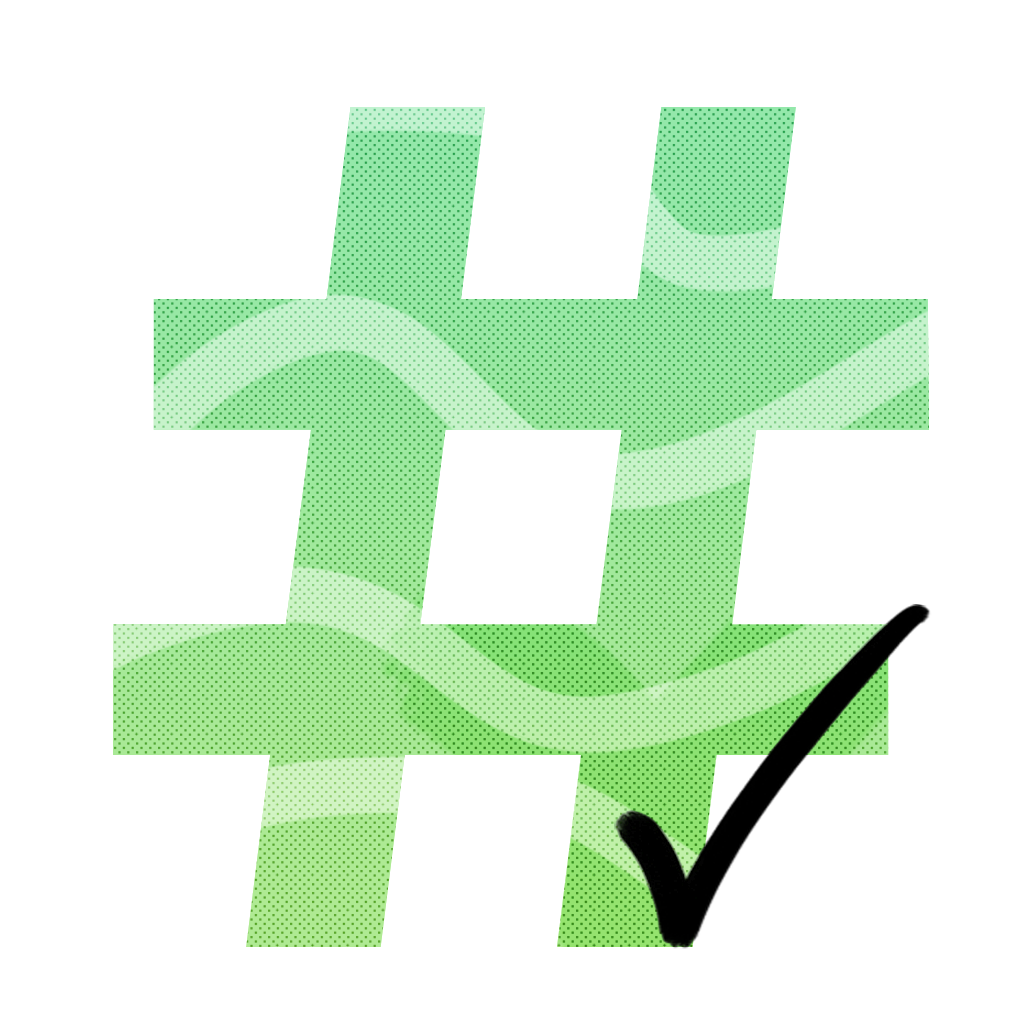
<style>
.page{position:relative;width:1024px;height:1024px;background:#ffffff}
.page>*{position:absolute;margin:0}
.t1{font:1200px "Montserrat-Bold"}
</style>
<div class="page">
<p class="t1" style="left:113px;top:107px;width:816px;height:840px">#</p>
<p class="t1" style="left:113px;top:107px;width:816px;height:840px">#</p>
</div>
